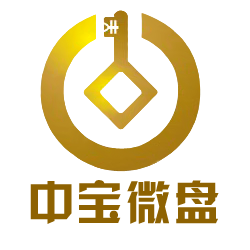
<style>
.page{position:relative;width:250px;height:250px;background:#ffffff}
.page>*{position:absolute;margin:0}
.t1{font:46.3px "HYk2gj";letter-spacing:0.05em;color:#8e6201}
</style>
<div class="page">
<p class="t1" style="left:30px;top:180px;width:189px;height:44px">中宝微盘</p>
</div>
